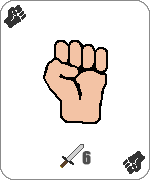
<style>
.page{position:relative;width:150px;height:180px;background:#ffffff}
.page>*{position:absolute;margin:0}
.t1{font:16px "Impact";color:#4f4f4f;font-weight:bold}
</style>
<div class="page">
<p class="t1" style="left:82px;top:151px;width:9px;height:14px">6</p>
</div>
